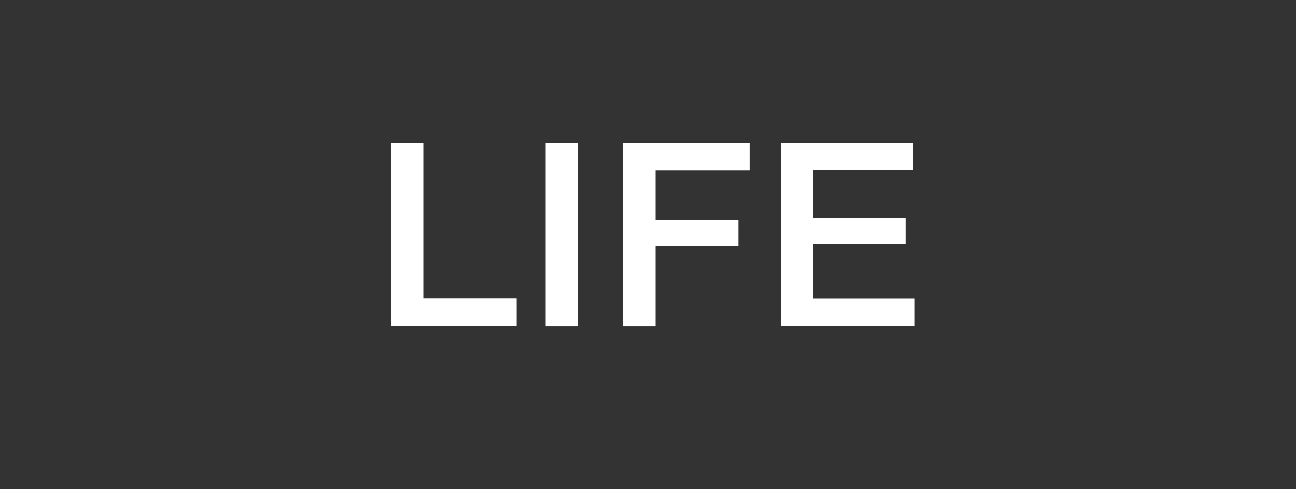
<style>
.page{position:relative;width:1296px;height:489px;background:#333333}
.page>*{position:absolute;margin:0}
.t1{font:257.2px "HelveticaNeueCyr-Medium";letter-spacing:0.025em;color:#ffffff}
</style>
<div class="page">
<p class="t1" style="left:391px;top:143px;width:524px;height:184px">LIFE</p>
</div>
